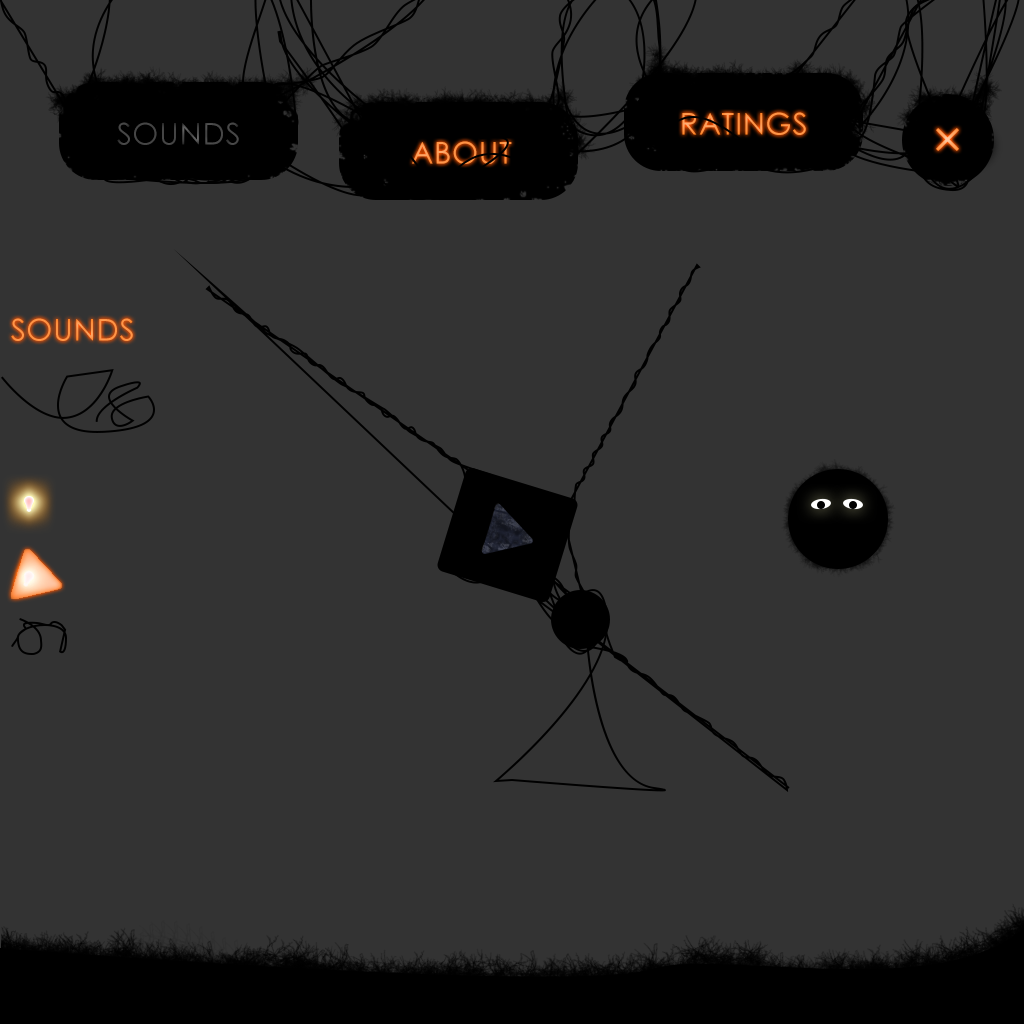
<style>
.page{position:relative;width:1024px;height:1024px;background:#333333}
.page>*{position:absolute;margin:0}
.t1{font:30px "CenturyGothic";letter-spacing:0.025em;color:#ff9547}
.t2{font:30px "CenturyGothic";letter-spacing:0.025em;color:#454545}
.t3{font:30px "CenturyGothic";letter-spacing:0.025em}
.t4{font:30px "CenturyGothic";letter-spacing:0.025em;color:#ff9445}
</style>
<div class="page">
<p class="t1" style="left:682px;top:112px;width:124px;height:23px">RATINGS</p>
<p class="t2" style="left:117px;top:122px;width:122px;height:23px">SOUNDS</p>
<p class="t3" style="left:412px;top:141px;width:100px;height:23px">ABOUT</p>
<p class="t4" style="left:11px;top:318px;width:122px;height:23px">SOUNDS</p>
</div>
